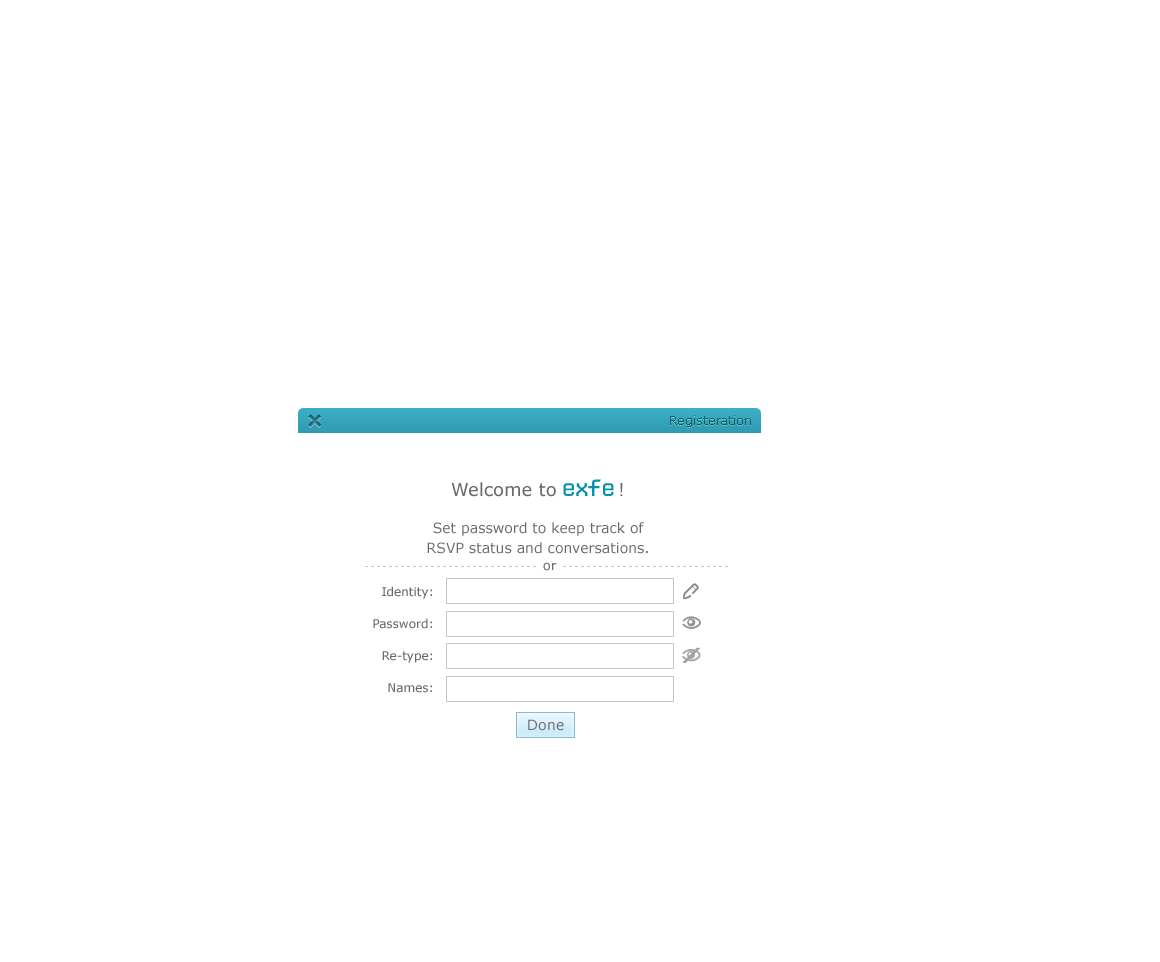
<style>
.page{position:relative;width:1160px;height:962px;background:#ffffff}
.page>*{position:absolute;margin:0}
.t1{font:12px "Verdana";color:#225660}
.t2{font:14px/20px "Verdana";color:#696969}
.t3{font:18px/20px "Verdana";color:#696969}
.t4{font:24px/24.7px "CPMono_v07Plain";letter-spacing:-0.1em;color:#0591af}
.t5{font:13px "Verdana";color:#696969}
.t6{font:12px/20px "Verdana";color:#696969}
.t7{font:14px "Verdana";letter-spacing:0.025em;color:#696969}
</style>
<div class="page">
<p class="t1" style="left:670px;top:415px;width:81px;height:12px">Registeration</p>
<p class="t2" style="left:427px;top:479px;width:221px;height:75px;text-align:center"><span class="t3">Welcome to </span><span class="t4">exfe </span><span class="t3">!<br></span><br>Set password to keep track of<br>RSVP status and conversations.</p>
<p class="t5" style="left:543px;top:562px;width:14px;height:9px">or</p>
<p class="t6" style="left:373px;top:586px;width:59px;height:107px;text-align:right">Identity:<br>Password:<br>Re-type:<br>Names:</p>
<p class="t7" style="left:528px;top:719px;width:36px;height:12px">Done</p>
</div>
